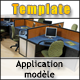
<style>
.page{position:relative;width:80px;height:80px}
.page>*{position:absolute;margin:0}
.t1{font:12.8px "Impact";letter-spacing:0.1em;color:#ffd300}
.t2{font:8.8px "TrebuchetMS";letter-spacing:0.025em;color:#000000}
</style>
<div class="page">
<p class="t1" style="left:12px;top:4px;width:58px;height:12px">Template</p>
<p class="t2" style="left:16px;top:60px;width:47px;height:18px;text-align:center">Application<br>modèle</p>
</div>
